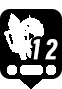
<style>
.page{position:relative;width:62px;height:89px;background:#000000}
.page>*{position:absolute;margin:0}
.t1{font:26.1px "zihunbiantaoti";color:#ffffff}
</style>
<div class="page">
<p class="t1" style="left:33px;top:39px;width:25px;height:21px">12</p>
</div>
